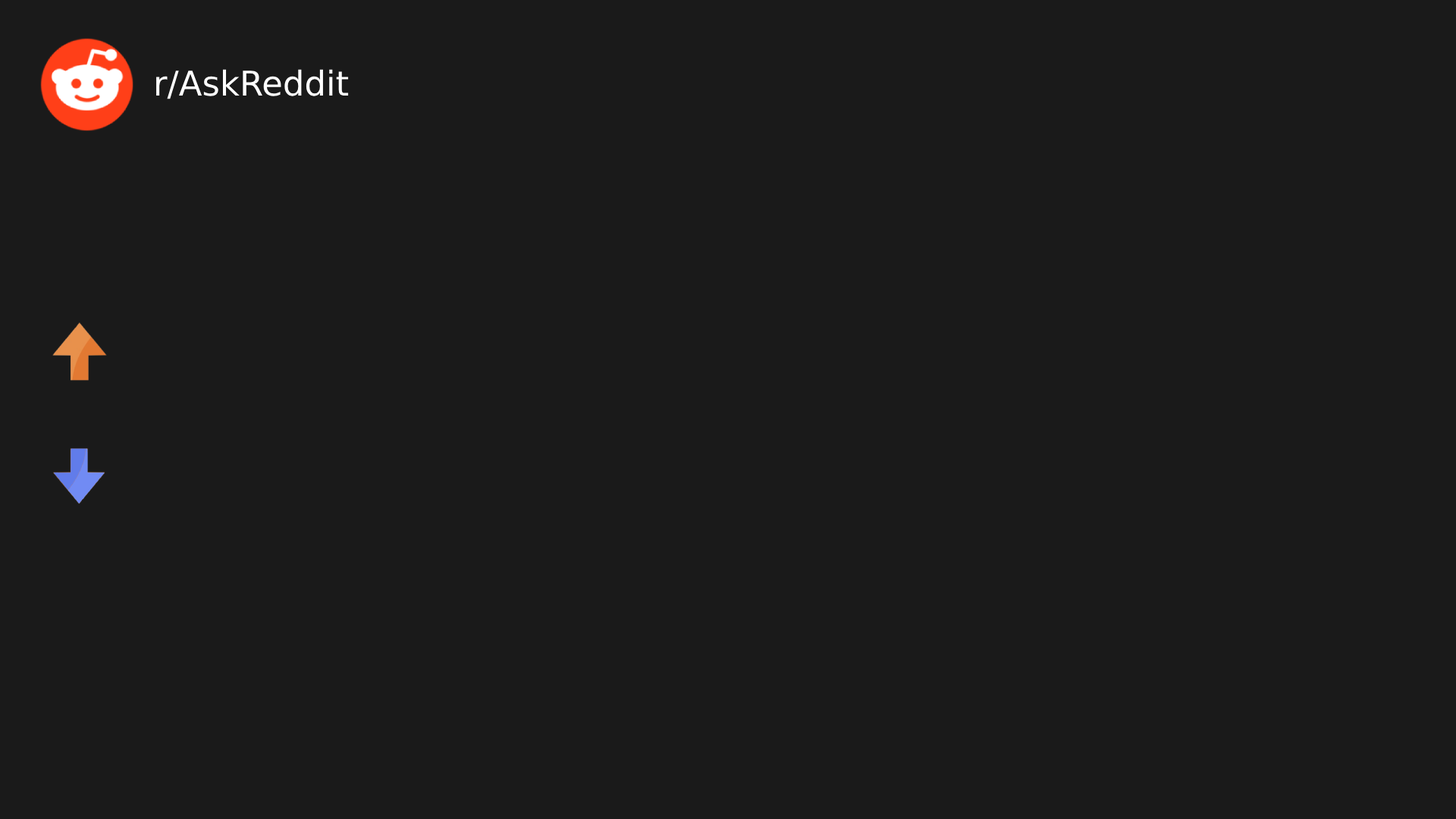
<style>
.page{position:relative;width:1456px;height:819px;background:#1a1a1a}
.page>*{position:absolute;margin:0}
.t1{font:34.1px "DejaVuSans";color:#ffffff}
</style>
<div class="page">
<p class="t1" style="left:156px;top:69px;width:193px;height:30px">r/AskReddit</p>
</div>
